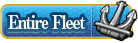
<style>
.page{position:relative;width:138px;height:43px}
.page>*{position:absolute;margin:0}
.t1{font:18px "RyuminPro-ExBold";letter-spacing:-0.08em;color:#fffef9;scale:0.9 1}
</style>
<div class="page">
<p class="t1" style="left:8px;top:15px;width:78px;height:14px">Entire Fleet</p>
</div>
